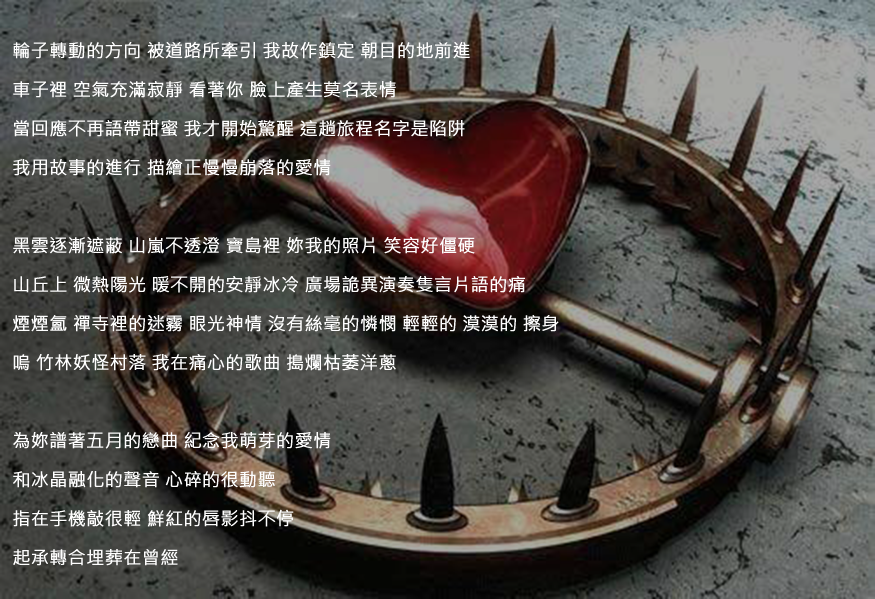
<style>
.page{position:relative;width:875px;height:599px}
.page>*{position:absolute;margin:0}
.t1{font:18px/39px "MicrosoftJhengHeiRegular";color:#fefefe;font-weight:bold}
</style>
<div class="page">
<p class="t1" style="left:13px;top:42px;width:546px;height:524px">輪子轉動的方向 被道路所牽引 我故作鎮定 朝目的地前進<br>車子裡 空氣充滿寂靜 看著你 臉上產生莫名表情<br>當回應不再語帶甜蜜 我才開始驚醒 這趟旅程名字是陷阱<br>我用故事的進行 描繪正慢慢崩落的愛情<br><br>黑雲逐漸遮蔽 山嵐不透澄 寶島裡 妳我的照片 笑容好僵硬<br>山丘上 微熱陽光 暖不開的安靜冰冷 廣場詭異演奏隻言片語的痛<br>煙煙氳 禪寺裡的迷霧 眼光神情 沒有絲毫的憐憫 輕輕的 漠漠的 擦身<br>嗚 竹林妖怪村落 我在痛心的歌曲 搗爛枯萎洋蔥<br><br>為妳譜著五月的戀曲 紀念我萌芽的愛情<br>和冰晶融化的聲音 心碎的很動聽<br>指在手機敲很輕 鮮紅的唇影抖不停<br>起承轉合埋葬在曾經</p>
</div>
